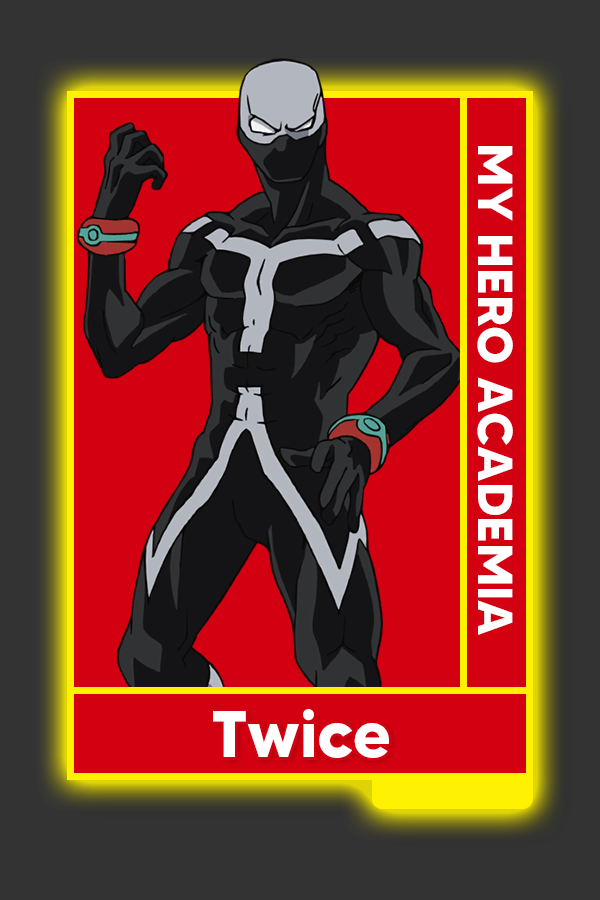
<style>
.page{position:relative;width:600px;height:900px;background:#d20010}
.page>*{position:absolute;margin:0}
.t1{font:48.8px "MADETOMMY-Bold";color:#ffffff}
.t2{font:65.2px "MADETOMMY-Bold";color:#ffffff}
</style>
<div class="page">
<p class="t1" style="left:477px;top:146px;width:36px;height:489px;rotate:90deg">MY HERO ACADEMIA</p>
<p class="t2" style="left:213px;top:709px;width:176px;height:49px">Twice</p>
</div>
